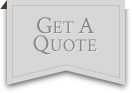
<style>
.page{position:relative;width:132px;height:93px;background:#d7d7d7}
.page>*{position:absolute;margin:0}
.t1{font:18px/18px "CrimsonText-Roman";color:#8a8888}
.t2{font:24px/18px "CrimsonText-Roman";color:#8a8888}
</style>
<div class="page">
<p class="t1" style="left:33px;top:17px;width:64px;height:38px;text-align:center"><span class="t2">G</span>ET <span class="t2">A<br>Q</span>UOTE</p>
</div>
